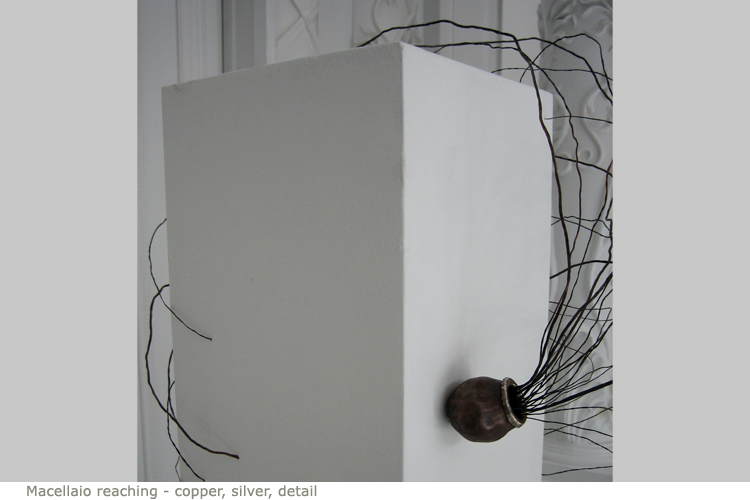
<style>
.page{position:relative;width:750px;height:500px;background:#c8c7c7}
.page>*{position:absolute;margin:0}
.t1{font:14px "Verdana";letter-spacing:0.01em;color:#898a7d}
</style>
<div class="page">
<p class="t1" style="left:27px;top:485px;width:290px;height:14px">Macellaio reaching - copper, silver, detail</p>
</div>
